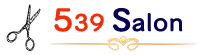
<style>
.page{position:relative;width:200px;height:55px;background:#ffffff}
.page>*{position:absolute;margin:0}
.t1{font:23.5px "ChulabhornLikitText-Regular";color:#070355;font-weight:bold;scale:1.06 1}
.t2{font:31.3px "ChulabhornLikitText-Regular";color:#f02f08;font-weight:bold;scale:1.06 1}
.t3{font:23.5px "ChulabhornLikitText-Regular";color:#f02f08;font-weight:bold;scale:1.06 1}
.t4{font:31.3px "ChulabhornLikitText-Regular";color:#070355;font-weight:bold;scale:1.06 1}
</style>
<div class="page">
<p class="t1" style="left:54px;top:8px;width:129px;height:24px"><span class="t2">5</span><span class="t3">39 </span><span class="t4">S</span>alon</p>
</div>
